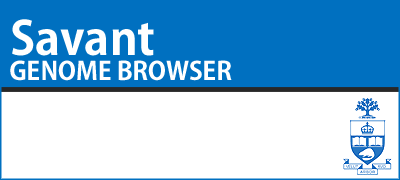
<style>
.page{position:relative;width:400px;height:180px;background:#ffffff}
.page>*{position:absolute;margin:0}
.t1{font:25px/20.8px "AdobeGothicStd-Bold";color:#ffffff;text-transform:uppercase}
.t2{font:45.8px/20.8px "AdobeGothicStd-Bold";color:#ffffff}
</style>
<div class="page">
<p class="t1" style="left:10px;top:19px;width:222px;height:62px"><span class="t2">Savant<br></span>Genome Browser</p>
</div>
